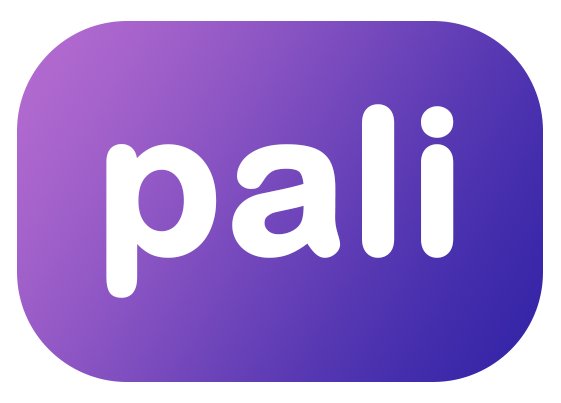
<style>
.page{position:relative;width:561px;height:403px;background:#ffffff}
.page>*{position:absolute;margin:0}
.t1{font:200px "ArialRoundedMTBold";color:#ffffff;font-weight:bold}
</style>
<div class="page">
<p class="t1" style="left:106px;top:104px;width:348px;height:194px">pali</p>
</div>
